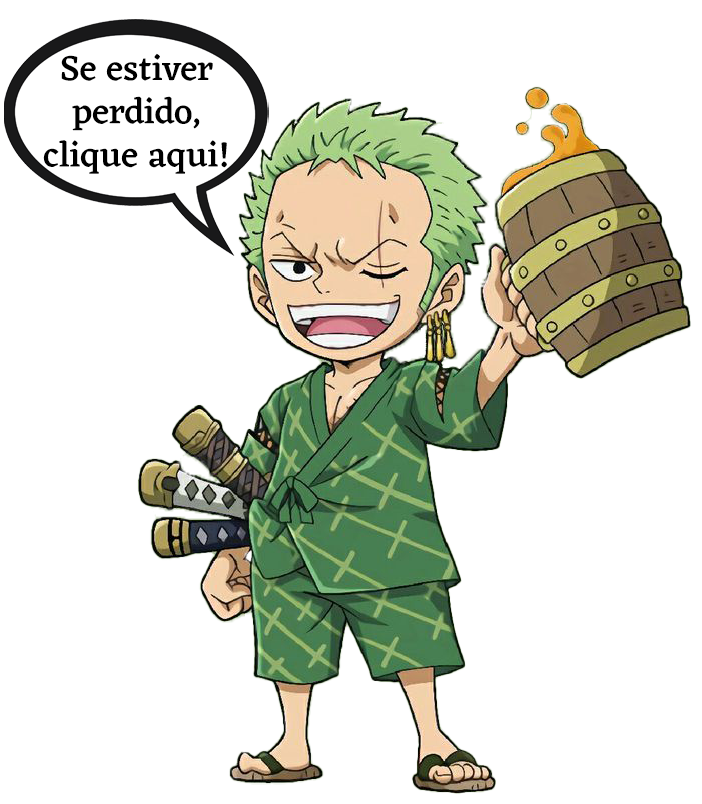
<style>
.page{position:relative;width:702px;height:804px;background:#ffffff}
.page>*{position:absolute;margin:0}
.t1{font:36px "Eczar-Medium";color:#000000}
</style>
<div class="page">
<p class="t1" style="left:43px;top:53px;width:184px;height:121px;text-align:center">Se estiver perdido, clique aqui!</p>
</div>
